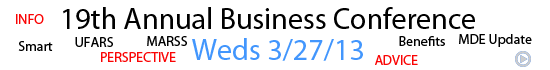
<style>
.page{position:relative;width:550px;height:70px;background:#ffffff}
.page>*{position:absolute;margin:0}
.t1{font:14px "MyriadPro-Regular";color:#fa0404}
.t2{font:30px "MyriadPro-Regular";color:#000000}
.t3{font:14px "MyriadPro-Regular";color:#000000}
.t4{font:30px "MyriadPro-Regular";color:#4296fd}
</style>
<div class="page">
<p class="t1" style="left:16px;top:14px;width:28px;height:10px">INFO</p>
<p class="t2" style="left:63px;top:7px;width:412px;height:22px">19th Annual Business Conference</p>
<p class="t3" style="left:18px;top:41px;width:35px;height:10px">Smart</p>
<p class="t3" style="left:75px;top:37px;width:38px;height:10px">UFARS</p>
<p class="t3" style="left:147px;top:36px;width:40px;height:10px">MARSS</p>
<p class="t4" style="left:192px;top:38px;width:171px;height:23px">Weds 3/27/13</p>
<p class="t3" style="left:399px;top:36px;width:46px;height:10px">Benefits</p>
<p class="t3" style="left:459px;top:34px;width:73px;height:13px">MDE Update</p>
<p class="t1" style="left:101px;top:52px;width:75px;height:10px">PERSPECTIVE</p>
<p class="t1" style="left:375px;top:55px;width:43px;height:10px">ADVICE</p>
</div>
